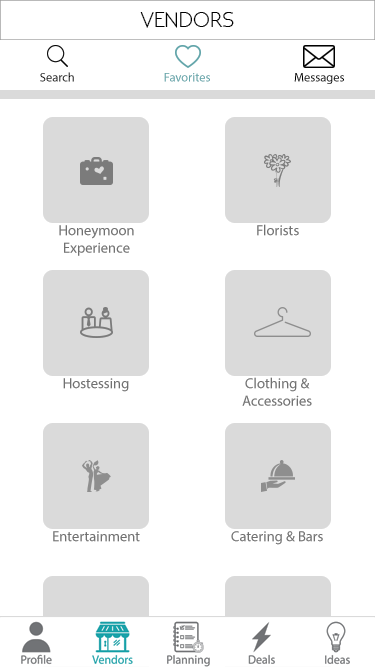
<style>
.page{position:relative;width:375px;height:667px;background:#ffffff}
.page>*{position:absolute;margin:0}
.t1{font:21.9px "NEOTERIC";color:#000000}
.t2{font:12.5px "MyriadPro-Regular";color:#050505}
.t3{font:12.5px "MyriadPro-Regular";color:#71bcc1}
.t4{font:12.5px "MyriadPro-Regular";color:#000000}
.t5{font:14.6px "MyriadPro-Regular";color:#838383}
</style>
<div class="page">
<p class="t1" style="left:140px;top:12px;width:94px;height:16px">VENDORS</p>
<p class="t2" style="left:40px;top:72px;width:34px;height:10px">Search</p>
<p class="t3" style="left:164px;top:73px;width:46px;height:9px">Favorites</p>
<p class="t4" style="left:294px;top:73px;width:50px;height:11px">Messages</p>
<p class="t5" style="left:59px;top:225px;width:75px;height:31px;text-align:center">Honeymoon <br>Experience</p>
<p class="t5" style="left:257px;top:224px;width:42px;height:12px">Florists</p>
<p class="t5" style="left:242px;top:377px;width:70px;height:29px;text-align:center">Clothing &amp;<br>Accessories</p>
<p class="t5" style="left:63px;top:378px;width:66px;height:14px">Hostessing</p>
<p class="t5" style="left:53px;top:531px;width:87px;height:11px">Entertainment</p>
<p class="t5" style="left:231px;top:531px;width:92px;height:14px">Catering &amp; Bars</p>
</div>
